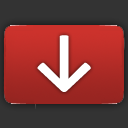
<style>
.page{position:relative;width:128px;height:128px;background:#333333}
.page>*{position:absolute;margin:0}
.t1{font:68.4px "Calibri-Bold";color:#ffffff;scale:1.07 1}
</style>
<div class="page">
<p class="t1" style="left:37px;top:35px;width:54px;height:57px">↓</p>
</div>
